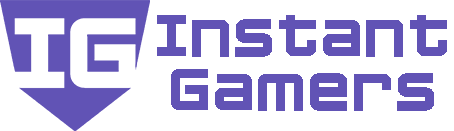
<style>
.page{position:relative;width:454px;height:131px;background:#ffffff}
.page>*{position:absolute;margin:0}
.t1{font:45px "Cubest-Bold";color:#6153b5}
</style>
<div class="page">
<p class="t1" style="left:157px;top:15px;width:290px;height:42px">Instant</p>
<p class="t1" style="left:171px;top:69px;width:263px;height:42px">Gamers</p>
</div>
